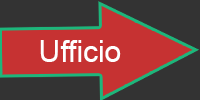
<style>
.page{position:relative;width:200px;height:100px;background:#333333}
.page>*{position:absolute;margin:0}
.t1{font:30px "ArialMT";color:#ffffff}
</style>
<div class="page">
<p class="t1" style="left:40px;top:40px;width:81px;height:22px">Ufficio</p>
</div>
